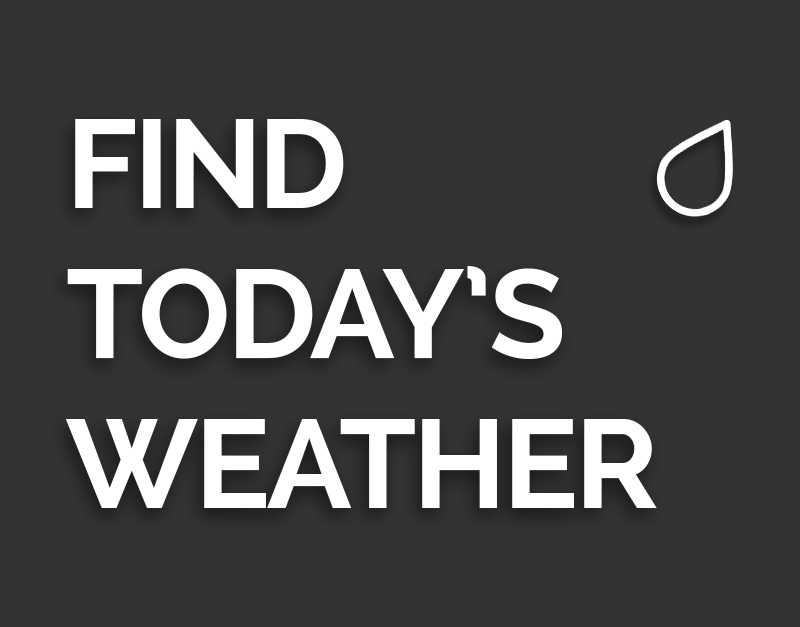
<style>
.page{position:relative;width:800px;height:627px;background:#333333}
.page>*{position:absolute;margin:0}
.t1{font:125px "Raleway-Bold";letter-spacing:-0.025em;color:#ffffff}
</style>
<div class="page">
<p class="t1" style="left:65px;top:119px;width:592px;height:389px">FIND <br>TODAY’S<br>WEATHER</p>
</div>
